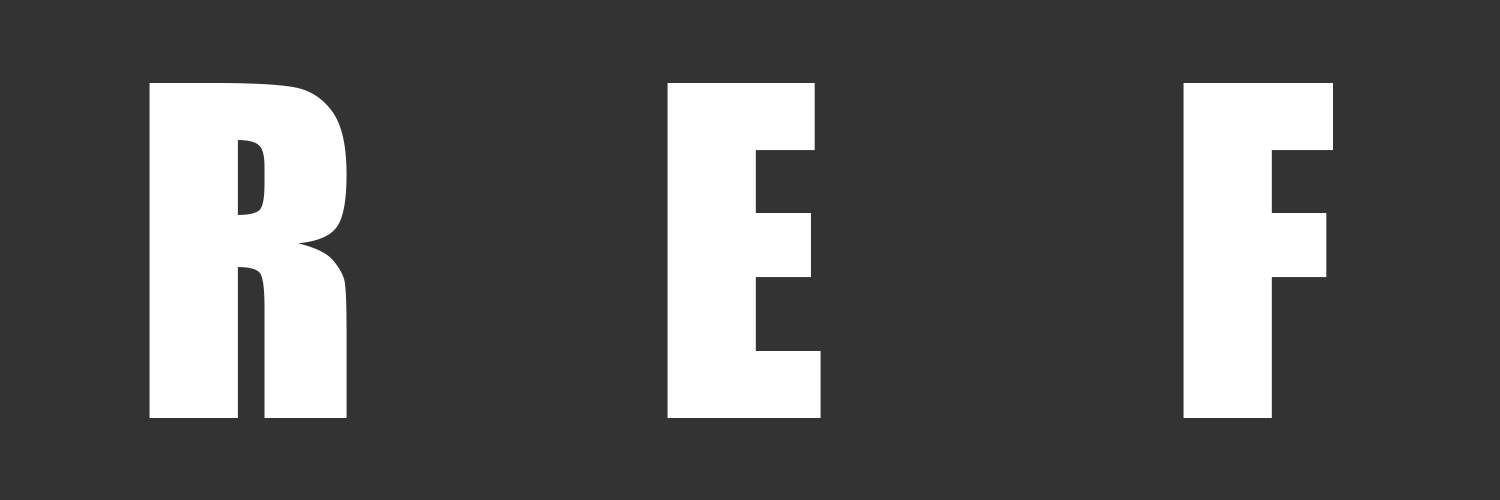
<style>
.page{position:relative;width:1500px;height:500px;background:#333333}
.page>*{position:absolute;margin:0}
.t1{font:424.2px "Impact";letter-spacing:-0.12em;color:#ffffff}
</style>
<div class="page">
<p class="t1" style="left:149px;top:83px;width:198px;height:335px">R</p>
<p class="t1" style="left:667px;top:83px;width:154px;height:335px">E</p>
<p class="t1" style="left:1183px;top:83px;width:150px;height:335px">F</p>
</div>
